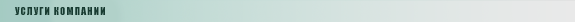
<style>
.page{position:relative;width:575px;height:22px}
.page>*{position:absolute;margin:0}
.t1{font:10px "Impact";letter-spacing:0.1em;color:#183b31}
</style>
<div class="page">
<p class="t1" style="left:15px;top:7px;width:90px;height:8px">УСЛУГИ КОМПАНИИ</p>
</div>
